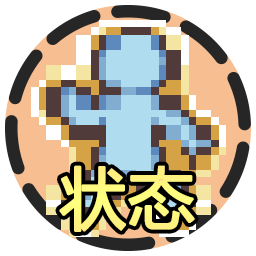
<style>
.page{position:relative;width:256px;height:256px;background:#ffffff}
.page>*{position:absolute;margin:0}
.t1{font:66.7px "MicrosoftYaHei";color:#fff880;font-weight:bold}
</style>
<div class="page">
<p class="t1" style="left:59px;top:165px;width:136px;height:67px">状态</p>
</div>
